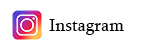
<style>
.page{position:relative;width:151px;height:50px;background:#ffffff}
.page>*{position:absolute;margin:0}
.t1{font:18px "Sylfaen";color:#000000}
</style>
<div class="page">
<p class="t1" style="left:49px;top:19px;width:75px;height:16px">Instagram</p>
</div>
